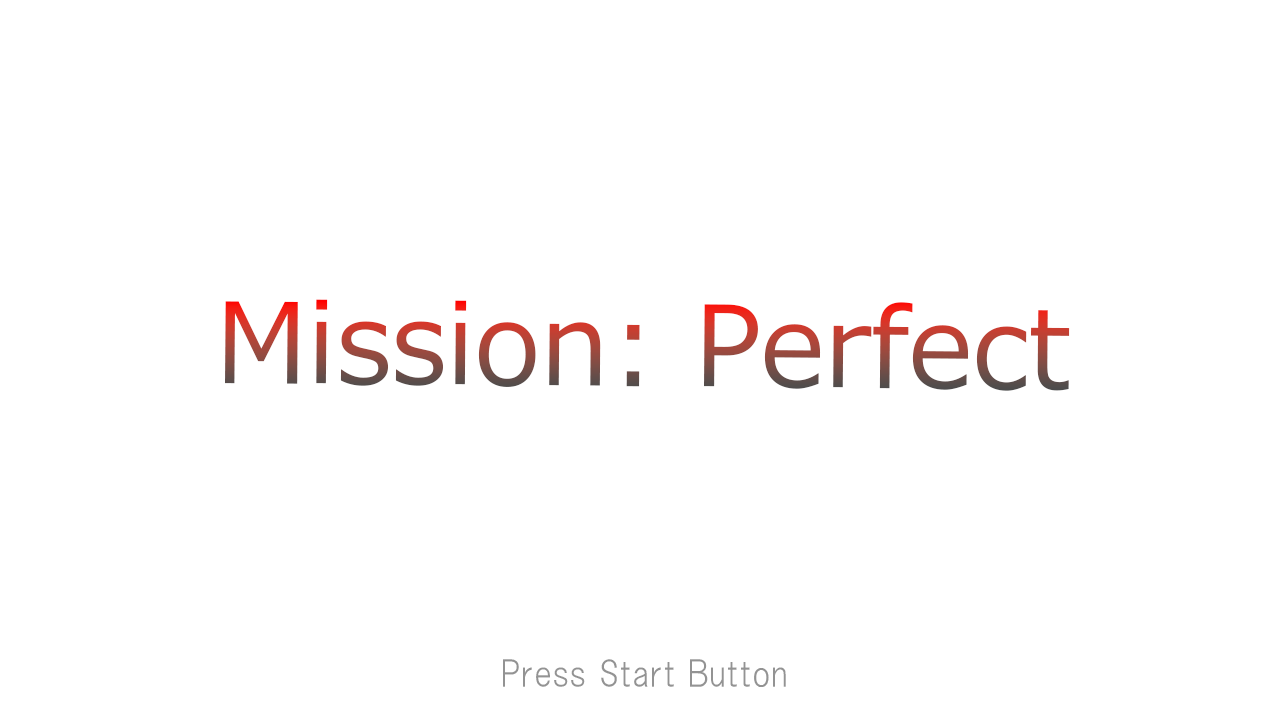
<style>
.page{position:relative;width:1280px;height:720px;background:#ffffff}
.page>*{position:absolute;margin:0}
.t1{font:111px "MeiryoUI"}
.t2{font:36px "HGSGothicM";color:#939393}
</style>
<div class="page">
<p class="t1" style="left:225px;top:299px;width:845px;height:92px">Mission: Perfect</p>
<p class="t2" style="left:503px;top:659px;width:283px;height:28px">Press Start Button</p>
</div>
